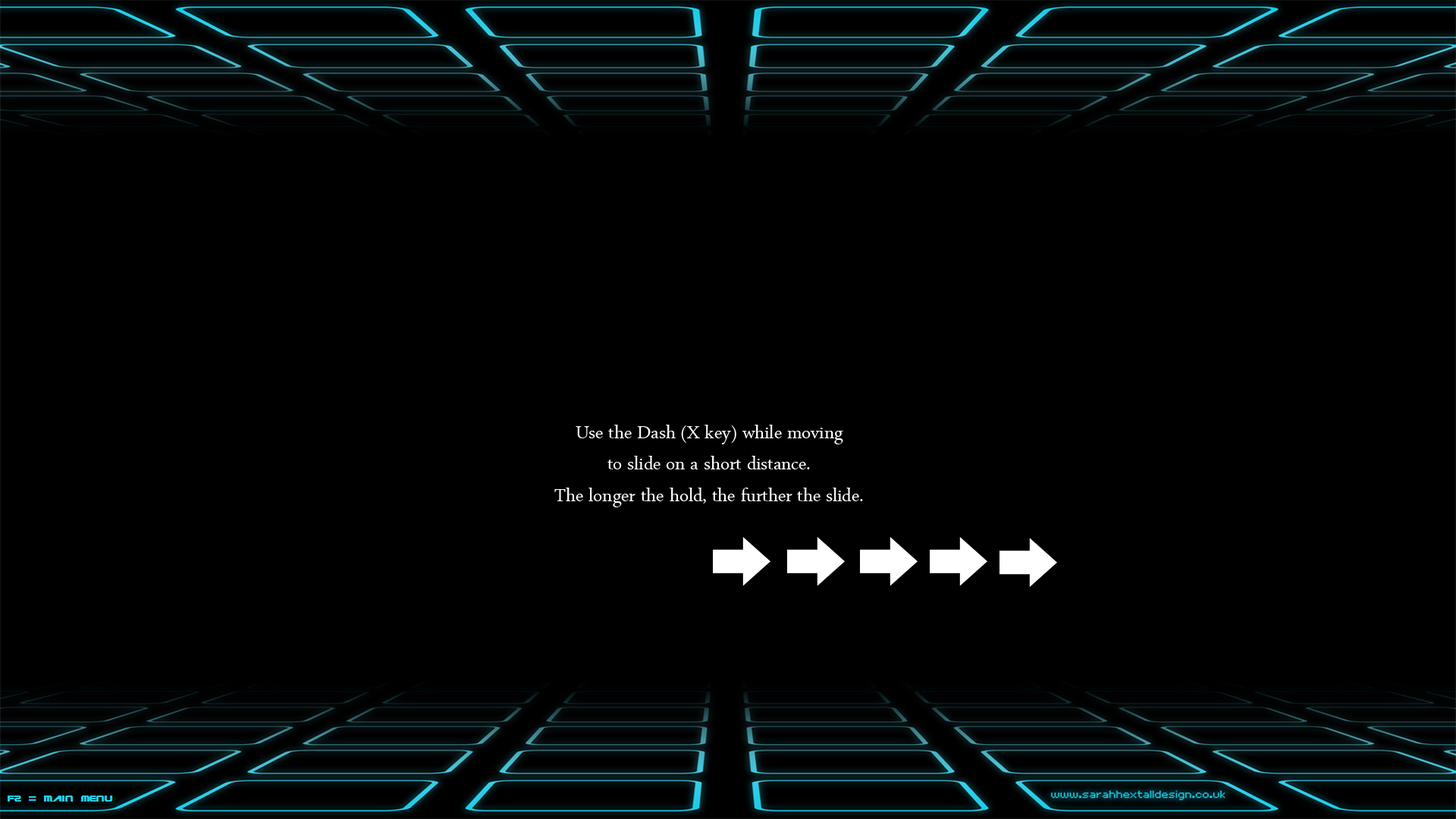
<style>
.page{position:relative;width:1456px;height:819px;background:#000000}
.page>*{position:absolute;margin:0}
.t1{font:26.3px "ArabicTypesetting";color:#ffffff}
</style>
<div class="page">
<p class="t1" style="left:554px;top:425px;width:309px;height:82px;text-align:center">Use the Dash (X key) while moving<br>to slide on a short distance.<br>The longer the hold, the further the slide.</p>
</div>
